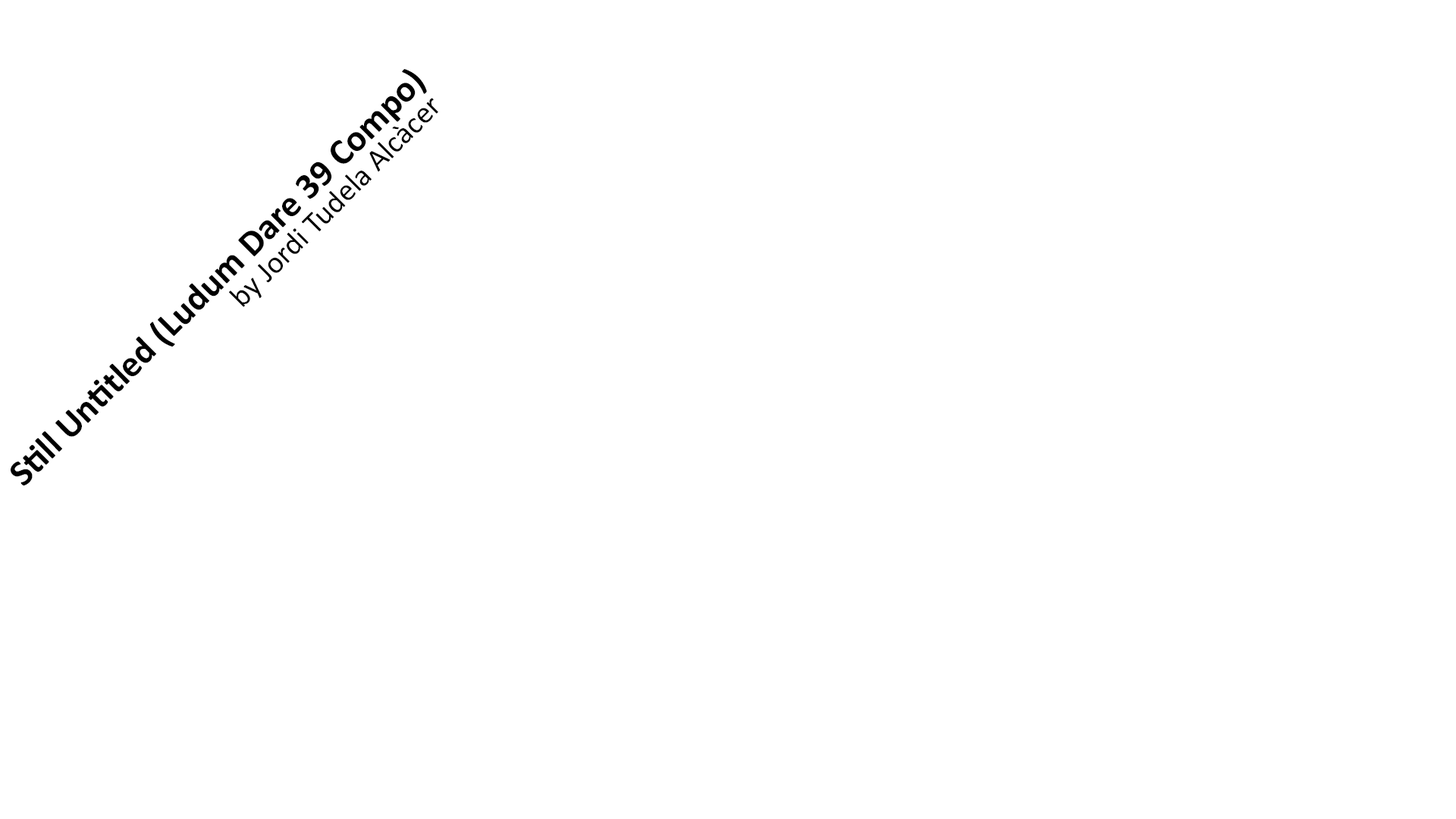
<style>
.page{position:relative;width:1456px;height:819px;background:#ffffff}
.page>*{position:absolute;margin:0}
.t1{font:36.9px "Calibri-Bold";color:#000000}
.t2{font:30.7px "Calibri";color:#000000}
</style>
<div class="page">
<p class="t1" style="left:11px;top:69px;width:416px;height:417px;rotate:-45deg">Still Untitled (Ludum Dare 39 Compo)</p>
<p class="t2" style="left:229px;top:98px;width:209px;height:209px;rotate:-45deg">by Jordi Tudela Alcàcer</p>
</div>
